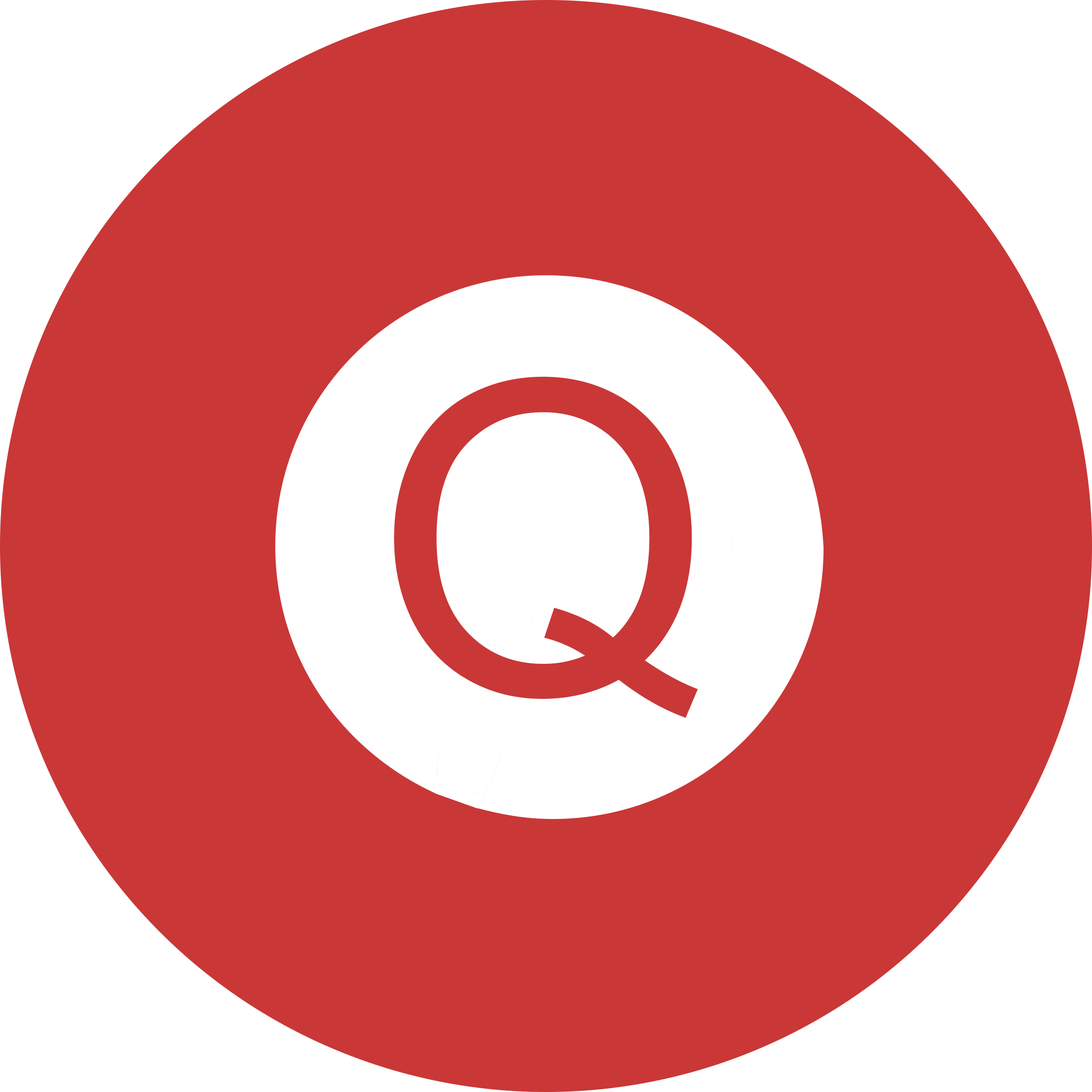
<style>
.page{position:relative;width:1092px;height:1092px;background:#ca3737}
.page>*{position:absolute;margin:0}
.t1{font:435.1px "ArialMT";color:#ca3737}
</style>
<div class="page">
<p class="t1" style="left:394px;top:377px;width:304px;height:341px">Q</p>
</div>
